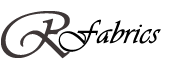
<style>
.page{position:relative;width:180px;height:70px;background:#ffffff}
.page>*{position:absolute;margin:0}
.t1{font:66.7px "Vivaldii";color:#3e3737;text-transform:uppercase;font-weight:bold}
.t2{font:33.3px "Vivaldii";color:#000000;font-weight:bold}
</style>
<div class="page">
<p class="t1" style="left:1px;top:11px;width:69px;height:48px">R</p>
<p class="t2" style="left:58px;top:19px;width:103px;height:33px">Fabrics</p>
</div>
